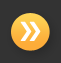
<style>
.page{position:relative;width:61px;height:63px;background:#333333}
.page>*{position:absolute;margin:0}
.t1{font:48px "Anivers-Regular";color:#ffffff}
</style>
<div class="page">
<p class="t1" style="left:20px;top:21px;width:21px;height:20px">»</p>
</div>
